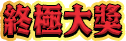
<style>
.page{position:relative;width:126px;height:41px}
.page>*{position:absolute;margin:0}
.t1{font:32px "AB-quadra";letter-spacing:0.05em;scale:0.9 1}
</style>
<div class="page">
<p class="t1" style="left:3px;top:4px;width:119px;height:31px">終極大獎</p>
</div>
